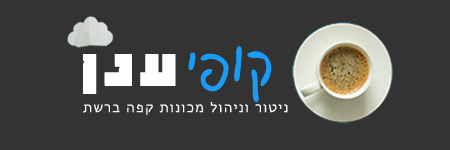
<style>
.page{position:relative;width:450px;height:150px;background:#333333}
.page>*{position:absolute;margin:0}
.t1{font:49.9px "MigdalHaemeq";letter-spacing:0.15em;color:#ffffff}
.t2{font:62.4px "Cafe";letter-spacing:0.05em;color:#189cf8}
.t3{font:13.7px "Gisha";letter-spacing:0.1em;color:#ffffff}
</style>
<div class="page">
<p class="t1" style="left:83px;top:54px;width:93px;height:40px">ןנע</p>
<p class="t2" style="left:188px;top:46px;width:84px;height:56px">יפוק</p>
<p class="t3" style="left:83px;top:102px;width:205px;height:13px">תשרב הפק תונוכמ לוהינו רוטינ</p>
</div>
